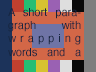
<style>
.page{position:relative;width:96px;height:72px;background:#d36747}
.page>*{position:absolute;margin:0}
.t1{font:11px "Helvetica";color:#16253f}
</style>
<div class="page">
<p class="t1" style="left:8px;top:8px;width:73px;height:49px;text-align:justify">A short paragraph with wrapping words and a second line.<br>Last paragraph.</p>
</div>
